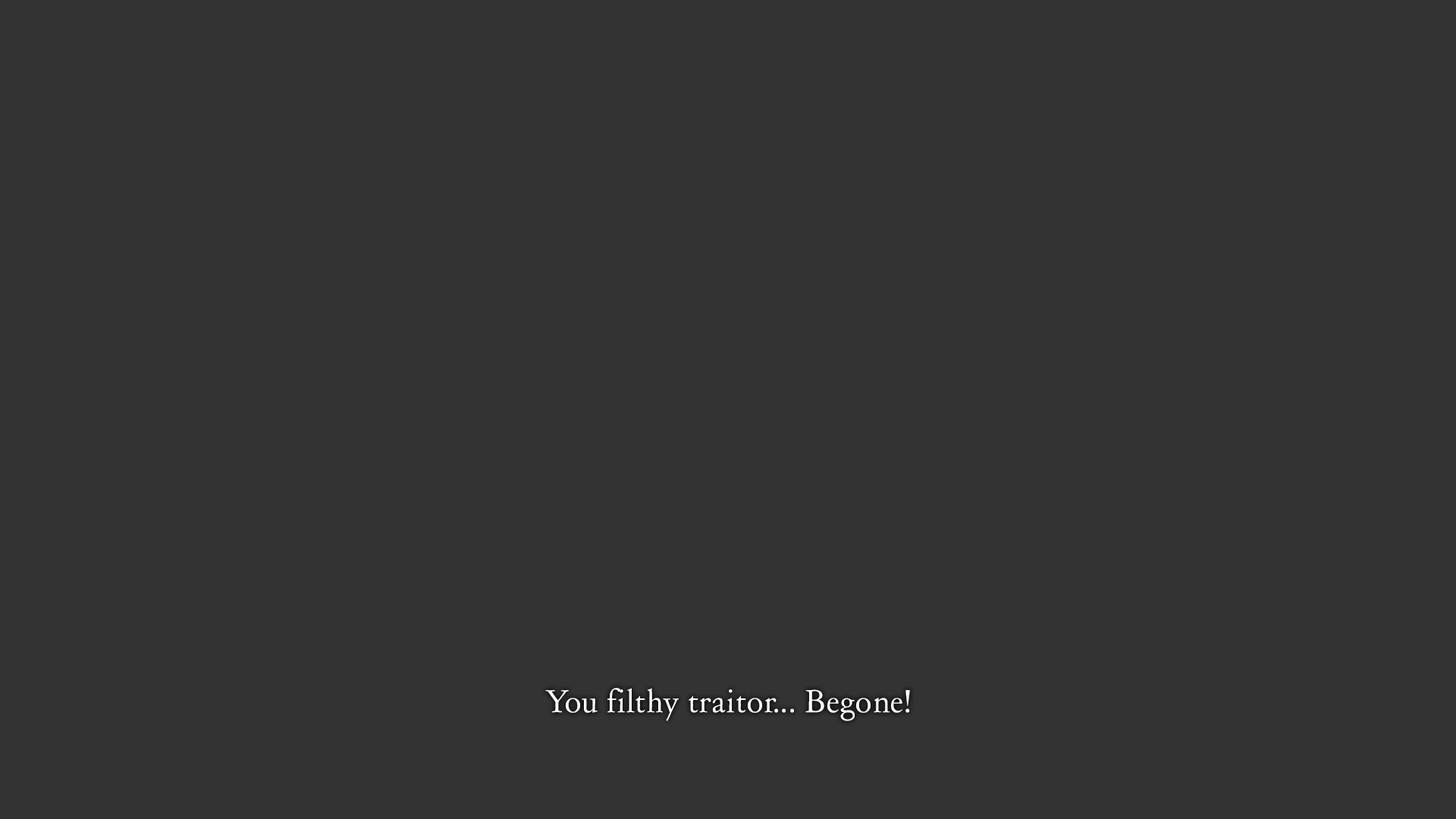
<style>
.page{position:relative;width:1456px;height:819px;background:#333333}
.page>*{position:absolute;margin:0}
.t1{font:30.3px "DayRoman";color:#ffffff}
</style>
<div class="page">
<p class="t1" style="left:545px;top:688px;width:365px;height:33px">You filthy traitor... Begone!</p>
</div>
